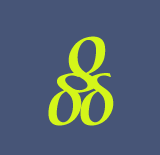
<style>
.page{position:relative;width:160px;height:155px;background:#475577}
.page>*{position:absolute;margin:0}
.t1{font:76.4px "PalatinoLinotype-BoldItalic";color:#d4f619;scale:1.05 1}
.t2{font:72px "PalatinoLinotype-BoldItalic";color:#d4f619}
</style>
<div class="page">
<p class="t1" style="left:68px;top:36px;width:38px;height:57px;rotate:178deg">δ</p>
<p class="t2" style="left:48px;top:73px;width:34px;height:53px">δ</p>
<p class="t2" style="left:80px;top:73px;width:34px;height:53px">δ</p>
</div>
